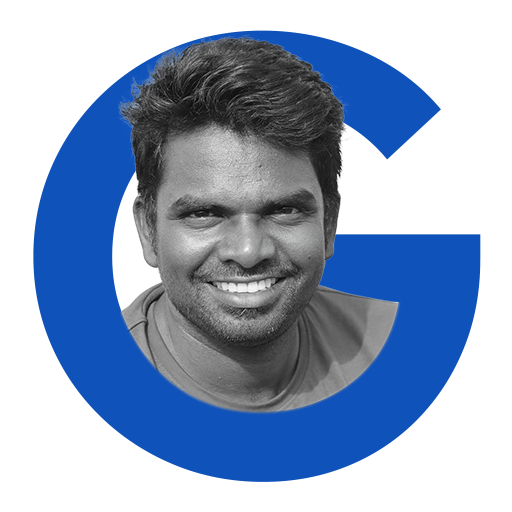
<style>
.page{position:relative;width:512px;height:512px;background:#ffffff}
.page>*{position:absolute;margin:0}
.t1{font:625px "RedHatDisplay-Bold";color:#0f52ba}
</style>
<div class="page">
<p class="t1" style="left:33px;top:30px;width:448px;height:452px">G</p>
</div>
